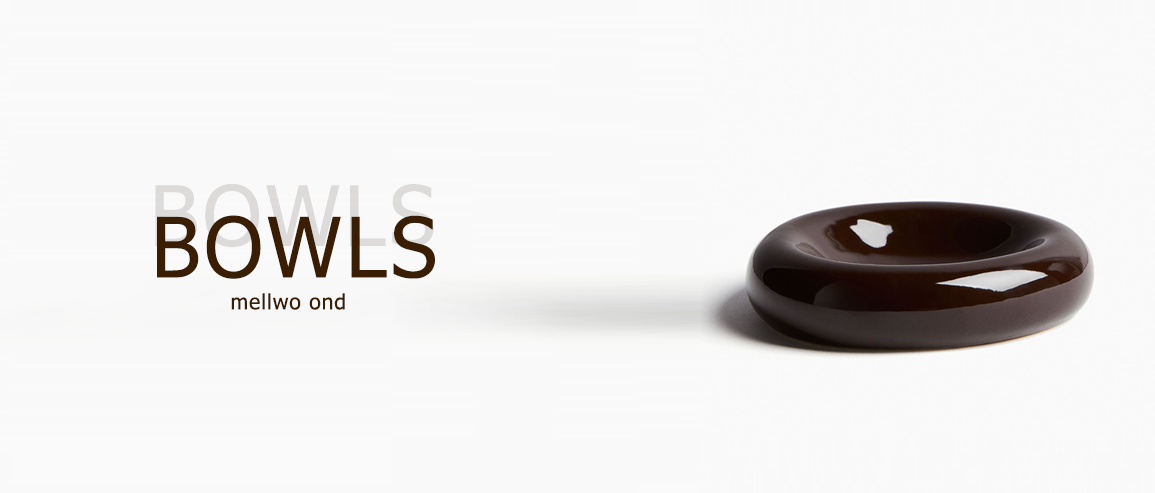
<style>
.page{position:relative;width:1155px;height:493px;background:#f9f9f9}
.page>*{position:absolute;margin:0}
.t1{font:83.2px "Tahoma";letter-spacing:0.045em;color:#391e03}
.t2{font:21.1px "Tahoma";letter-spacing:0.045em;color:#391e03}
</style>
<div class="page">
<p class="t1" style="left:157px;top:215px;width:278px;height:64px">BOWLS</p>
<p class="t2" style="left:231px;top:293px;width:114px;height:17px">mellwo ond</p>
</div>
